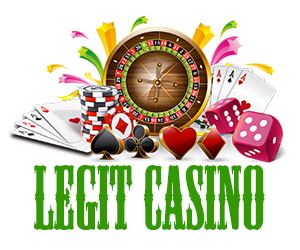
<style>
.page{position:relative;width:300px;height:250px;background:#ffffff}
.page>*{position:absolute;margin:0}
.t1{font:84.5px "MesquiteStd";color:#339900}
</style>
<div class="page">
<p class="t1" style="left:33px;top:165px;width:232px;height:65px">LEGIT CASINO</p>
</div>
